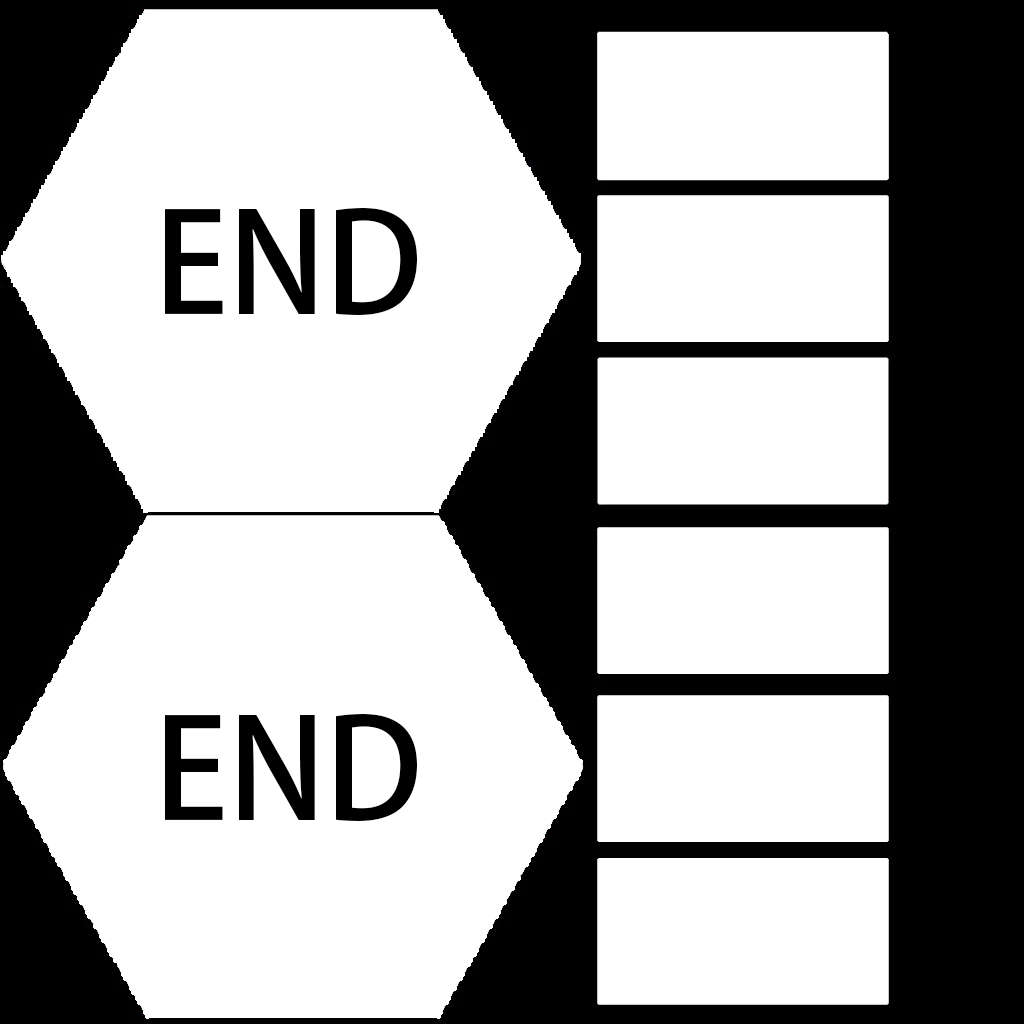
<style>
.page{position:relative;width:1024px;height:1024px;background:#ffffff}
.page>*{position:absolute;margin:0}
.t1{font:137.6px "AdobeHeitiStd-Regular";color:#000000}
</style>
<div class="page">
<p class="t1" style="left:165px;top:208px;width:252px;height:107px">END</p>
<p class="t1" style="left:165px;top:714px;width:252px;height:107px">END</p>
</div>
